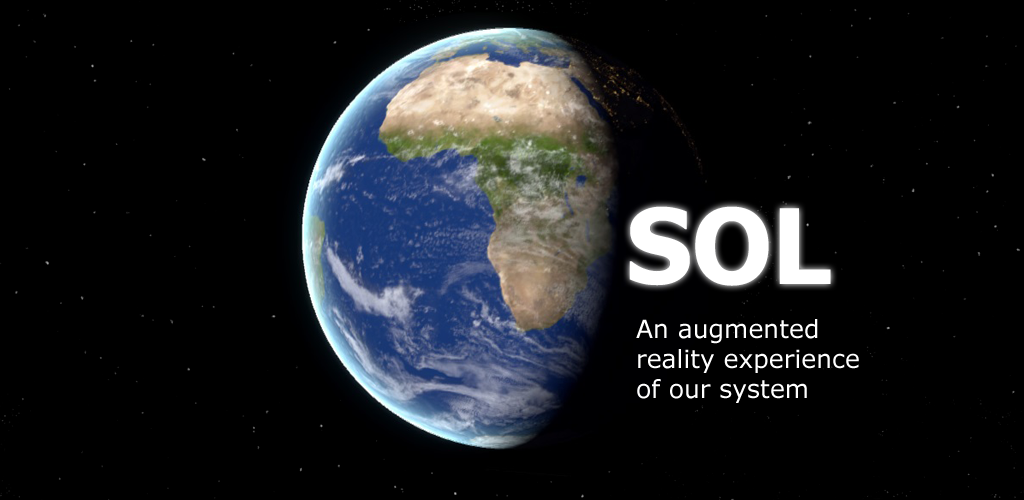
<style>
.page{position:relative;width:1024px;height:500px;background:#000000}
.page>*{position:absolute;margin:0}
.t1{font:104.1px "Tahoma-Bold";color:#ffffff}
.t2{font:25px "Verdana";color:#ffffff}
</style>
<div class="page">
<p class="t1" style="left:629px;top:206px;width:202px;height:80px">SOL</p>
<p class="t2" style="left:636px;top:319px;width:223px;height:84px">An augmented <br>reality experience <br>of our system</p>
</div>
